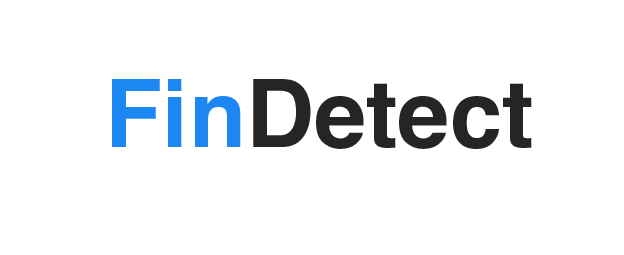
<style>
.page{position:relative;width:624px;height:255px;background:#ffffff}
.page>*{position:absolute;margin:0}
.t1{font:94px "Helvetica-Bold";color:#252526}
.t2{font:94px "Helvetica-Bold";color:#1c87f2}
</style>
<div class="page">
<p class="t1" style="left:112px;top:79px;width:420px;height:70px"><span class="t2">Fin</span>Detect</p>
</div>
